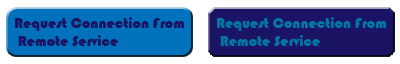
<style>
.page{position:relative;width:400px;height:64px;background:#1b1464}
.page>*{position:absolute;margin:0}
.t1{font:15px "Bauhaus93";color:#1b1464}
.t2{font:15px "Bauhaus93";color:#0076a3}
</style>
<div class="page">
<p class="t1" style="left:15px;top:17px;width:170px;height:30px">Request Connection From<br> Remote Service</p>
<p class="t2" style="left:217px;top:17px;width:170px;height:30px">Request Connection From<br> Remote Service</p>
</div>
